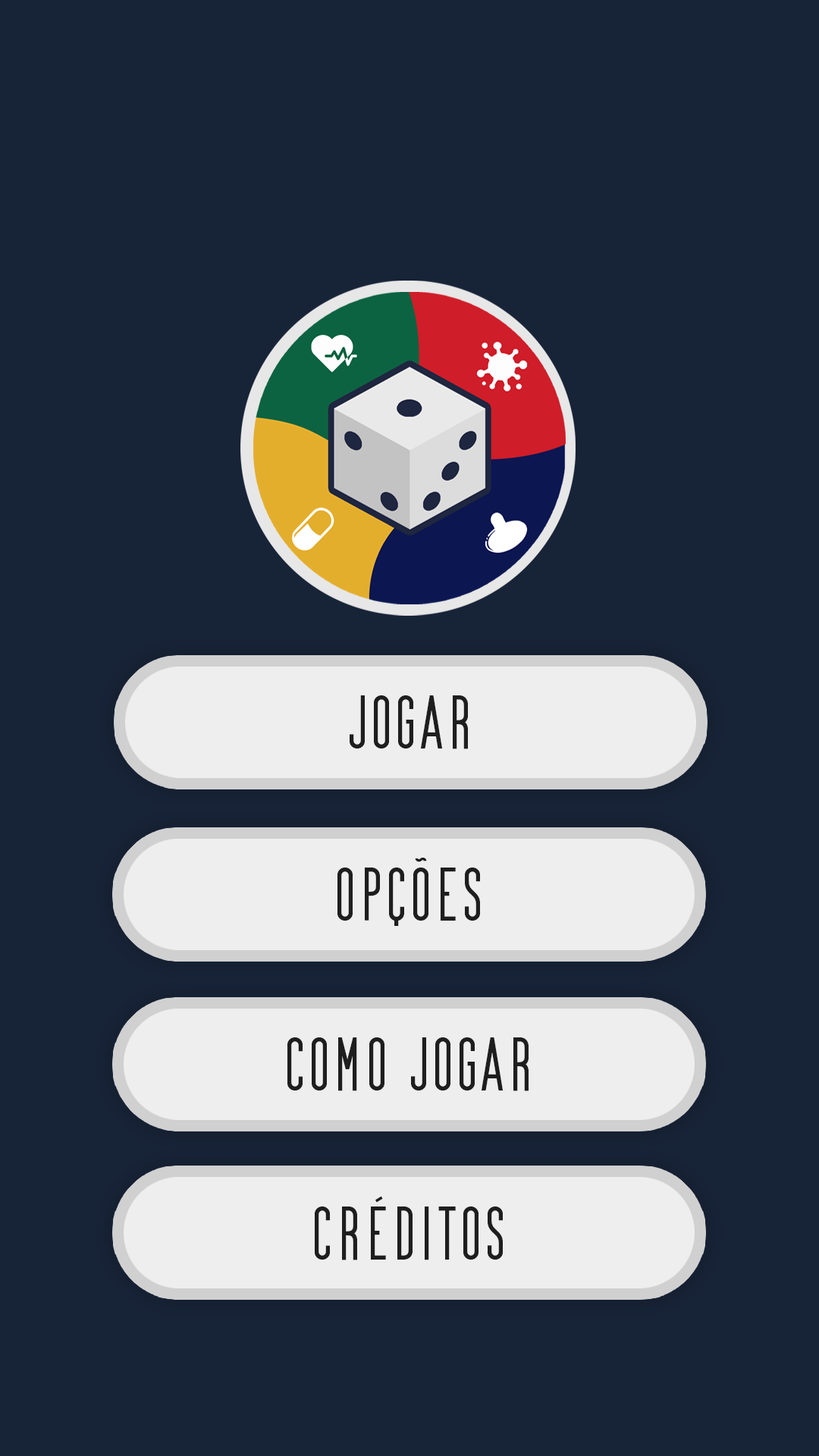
<style>
.page{position:relative;width:819px;height:1456px;background:#172337}
.page>*{position:absolute;margin:0}
.t1{font:75.9px "GrandAventureText";color:#1e1e1e}
</style>
<div class="page">
<p class="t1" style="left:350px;top:695px;width:118px;height:54px">Jogar</p>
<p class="t1" style="left:337px;top:858px;width:143px;height:68px">opções</p>
<p class="t1" style="left:287px;top:1037px;width:242px;height:54px">COMO JOGAR</p>
<p class="t1" style="left:315px;top:1196px;width:188px;height:64px">CRÉDITOS</p>
</div>
